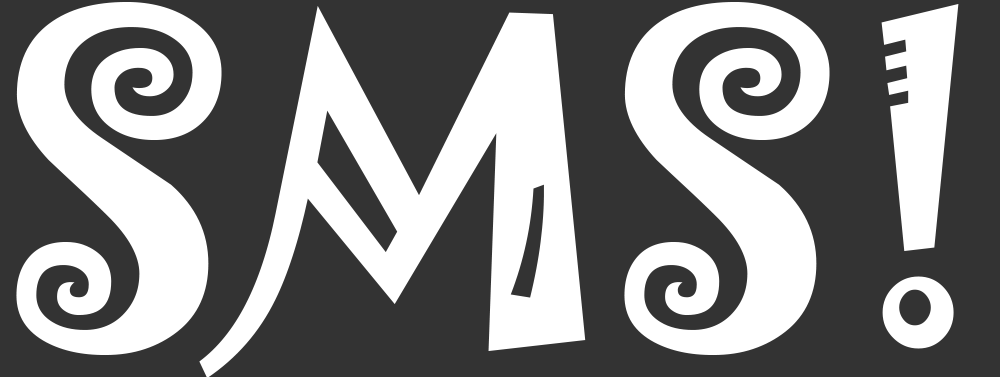
<style>
.page{position:relative;width:1000px;height:377px;background:#333333}
.page>*{position:absolute;margin:0}
.t1{font:398.1px "Jokerman-Regular";color:#ffffff}
</style>
<div class="page">
<p class="t1" style="left:16px;top:2px;width:943px;height:376px">SMS!</p>
</div>
